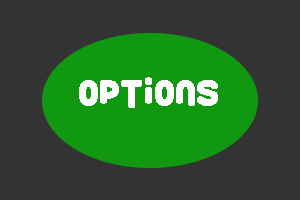
<style>
.page{position:relative;width:300px;height:200px;background:#333333}
.page>*{position:absolute;margin:0}
.t1{font:37.5px "RoundyRainbows";color:#ffffff}
</style>
<div class="page">
<p class="t1" style="left:79px;top:77px;width:139px;height:31px">Options</p>
</div>
